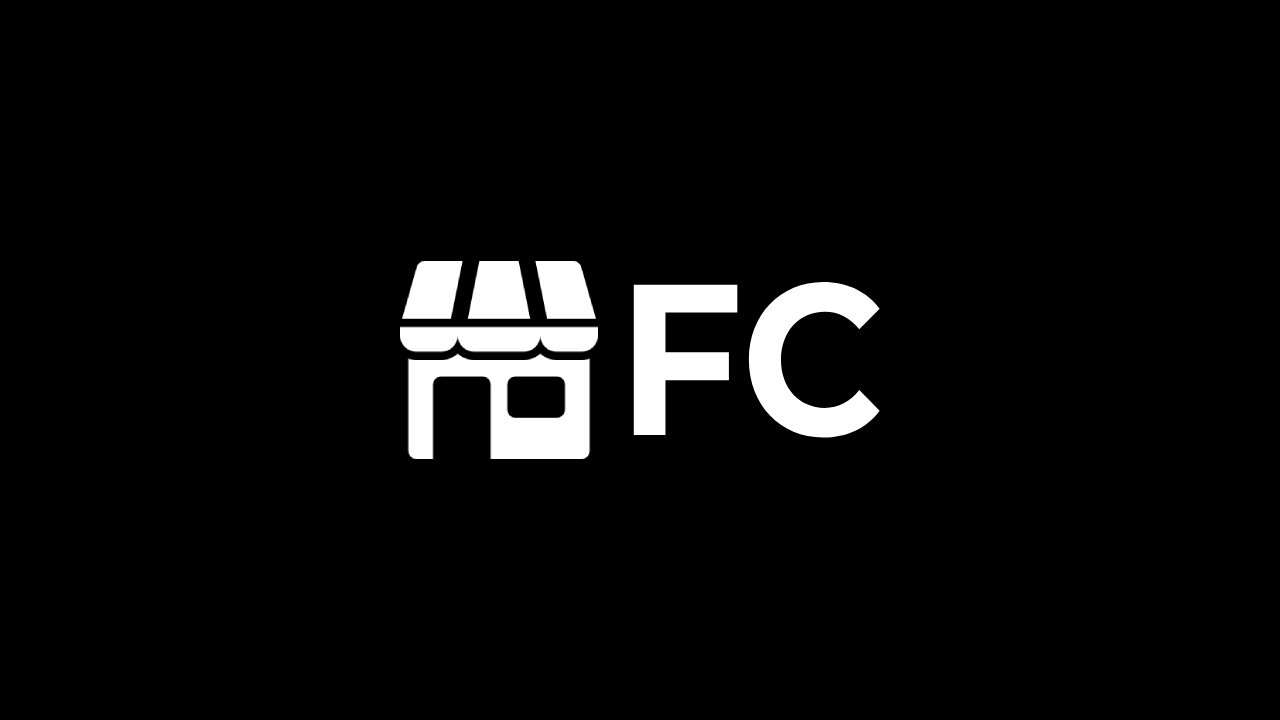
<style>
.page{position:relative;width:1280px;height:720px;background:#000000}
.page>*{position:absolute;margin:0}
.t1{font:214.8px "Montserrat-Bold";color:#ffffff;scale:0.91 1}
</style>
<div class="page">
<p class="t1" style="left:633px;top:282px;width:247px;height:156px">FC</p>
</div>
